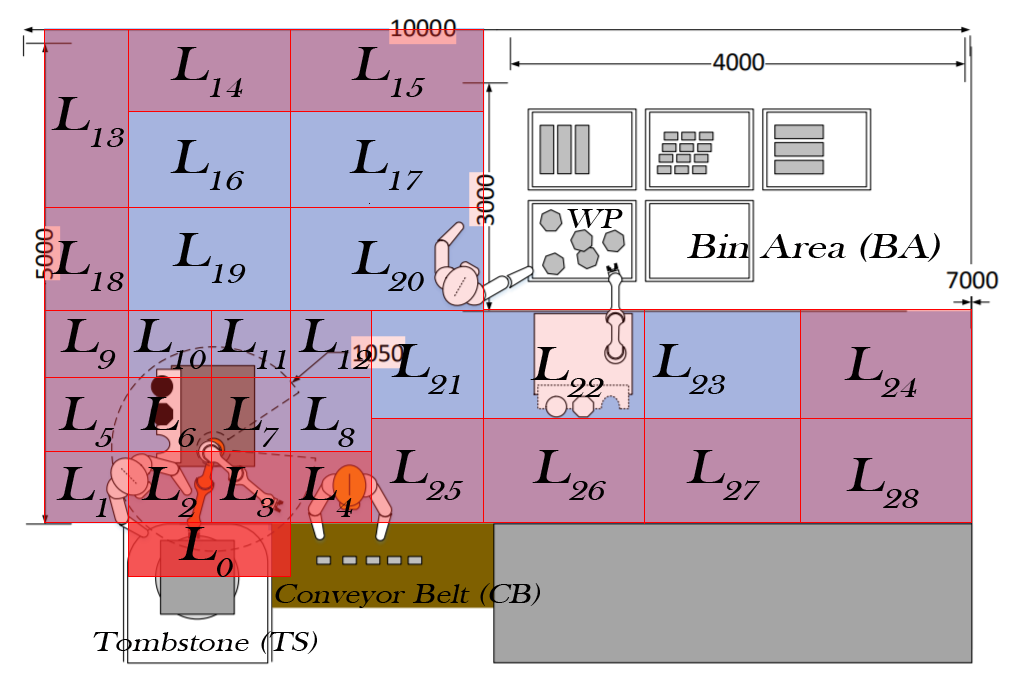
<style>
.page{position:relative;width:1010px;height:683px;background:#ffffff}
.page>*{position:absolute;margin:0}
.t1{font:50px "BaskOldFace";color:#010000;font-style:italic;scale:1.22 1}
.t2{font:28px "BaskOldFace";color:#010000;font-style:italic;scale:1.22 1}
.t3{font:36px "BaskOldFace";color:#010000;font-style:italic;scale:1.22 1}
</style>
<div class="page">
<p class="t1" style="left:170px;top:47px;width:73px;height:50px">L14</p>
<p class="t1" style="left:351px;top:47px;width:75px;height:50px">L15</p>
<p class="t1" style="left:51px;top:97px;width:73px;height:50px">L13</p>
<p class="t1" style="left:170px;top:140px;width:74px;height:50px">L16</p>
<p class="t1" style="left:349px;top:140px;width:74px;height:50px">L17</p>
<p class="t2" style="left:567px;top:209px;width:56px;height:19px">WP</p>
<p class="t1" style="left:172px;top:233px;width:74px;height:50px">L19</p>
<p class="t3" style="left:687px;top:233px;width:253px;height:29px">Bin Area (BA)</p>
<p class="t1" style="left:51px;top:241px;width:73px;height:50px">L18</p>
<p class="t1" style="left:351px;top:241px;width:73px;height:50px">L20</p>
<p class="t1" style="left:60px;top:319px;width:56px;height:50px">L9</p>
<p class="t1" style="left:133px;top:319px;width:73px;height:50px">L10</p>
<p class="t1" style="left:217px;top:319px;width:69px;height:50px">L11</p>
<p class="t1" style="left:298px;top:319px;width:74px;height:50px">L12</p>
<p class="t1" style="left:391px;top:344px;width:69px;height:50px">L21</p>
<p class="t1" style="left:530px;top:347px;width:74px;height:50px">L22</p>
<p class="t1" style="left:652px;top:344px;width:73px;height:50px">L23</p>
<p class="t1" style="left:844px;top:347px;width:73px;height:50px">L24</p>
<p class="t1" style="left:58px;top:397px;width:57px;height:50px">L5</p>
<p class="t1" style="left:140px;top:397px;width:56px;height:50px">L6</p>
<p class="t1" style="left:223px;top:397px;width:56px;height:50px">L7</p>
<p class="t1" style="left:300px;top:397px;width:55px;height:50px">L8</p>
<p class="t1" style="left:389px;top:450px;width:75px;height:50px">L25</p>
<p class="t1" style="left:532px;top:450px;width:74px;height:50px">L26</p>
<p class="t1" style="left:686px;top:450px;width:74px;height:50px">L27</p>
<p class="t1" style="left:846px;top:458px;width:73px;height:50px">L28</p>
<p class="t1" style="left:56px;top:467px;width:51px;height:50px">L1</p>
<p class="t1" style="left:141px;top:467px;width:56px;height:50px">L2</p>
<p class="t1" style="left:219px;top:467px;width:55px;height:50px">L3</p>
<p class="t1" style="left:298px;top:467px;width:55px;height:50px">L4</p>
<p class="t1" style="left:178px;top:527px;width:55px;height:50px">L0</p>
<p class="t2" style="left:275px;top:583px;width:265px;height:25px">Conveyor Belt (CB)</p>
<p class="t2" style="left:93px;top:631px;width:224px;height:23px">Tombstone (TS)</p>
</div>
